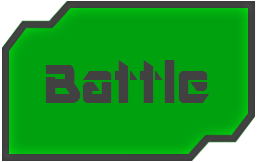
<style>
.page{position:relative;width:257px;height:162px;background:#00a10f}
.page>*{position:absolute;margin:0}
.t1{font:60px "ARDESTINE";color:#414141}
</style>
<div class="page">
<p class="t1" style="left:45px;top:60px;width:165px;height:43px">Battle</p>
</div>
